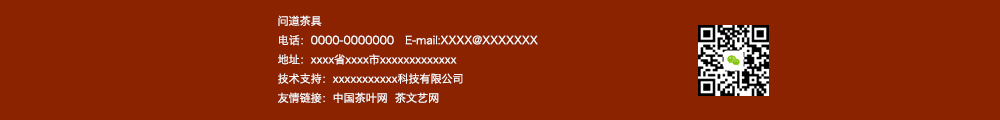
<style>
.page{position:relative;width:1000px;height:120px;background:#8c2300}
.page>*{position:absolute;margin:0}
.t1{font:11px "HiraginoSansGB-W3";color:#fbfcfb}
</style>
<div class="page">
<p class="t1" style="left:278px;top:15px;width:260px;height:88px">问道茶具<br>电话：0000-0000000   E-mail:XXXX@XXXXXXX<br>地址：xxxx省xxxx市xxxxxxxxxxxxx<br>技术支持：xxxxxxxxxxx科技有限公司<br>友情链接：中国茶叶网  茶文艺网</p>
</div>
